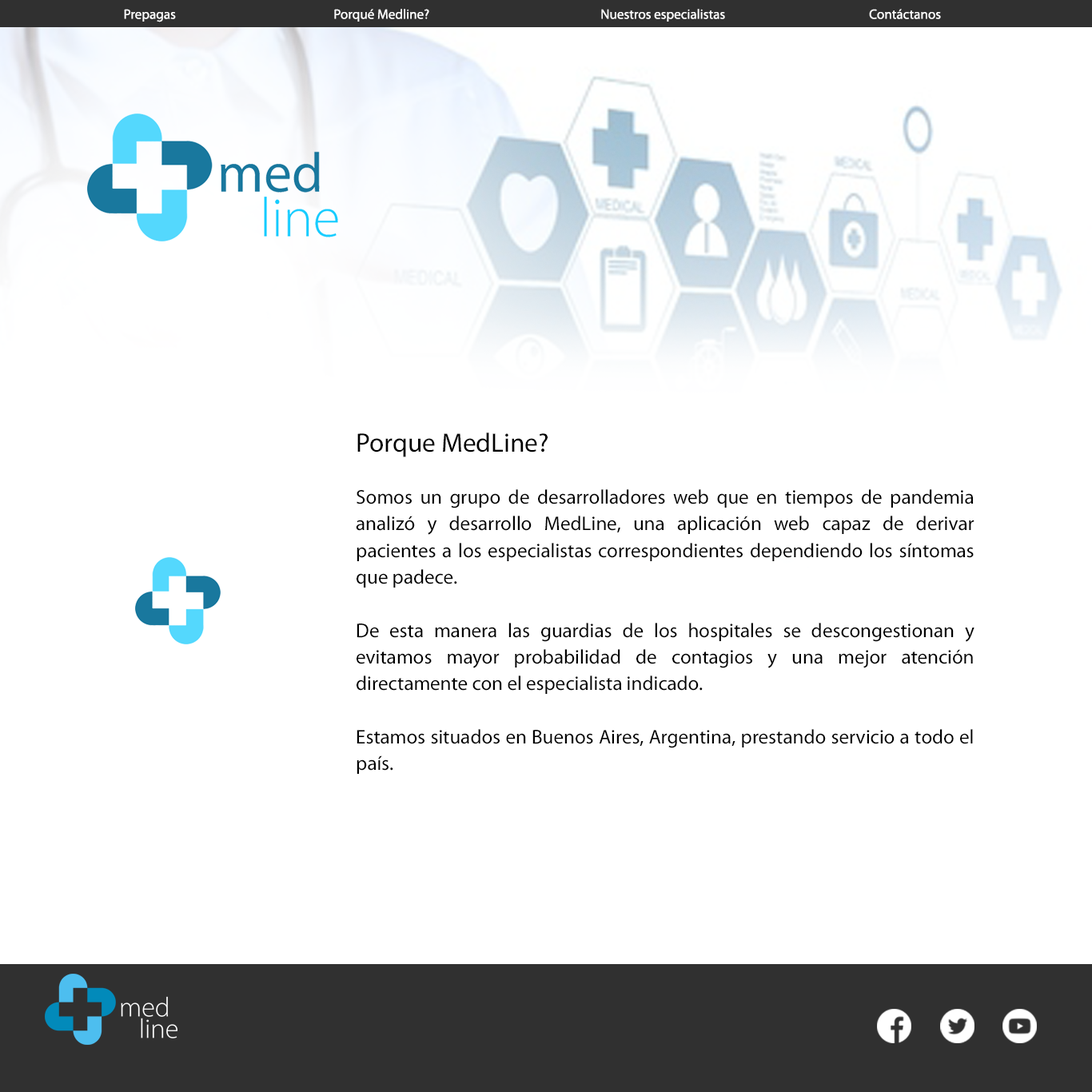
<style>
.page{position:relative;width:1092px;height:1092px;background:#ffffff}
.page>*{position:absolute;margin:0}
.t1{font:13.7px "MyriadPro-Regular";color:#ffffff}
.t2{font:26.6px "MyriadPro-Regular";color:#000000}
.t3{font:20px/26.6px "MyriadPro-Regular";color:#000000}
</style>
<div class="page">
<p class="t1" style="left:124px;top:9px;width:52px;height:13px">Prepagas</p>
<p class="t1" style="left:334px;top:9px;width:95px;height:13px">Porqué Medline?</p>
<p class="t1" style="left:601px;top:9px;width:124px;height:13px">Nuestros especialistas</p>
<p class="t1" style="left:869px;top:9px;width:72px;height:10px">Contáctanos</p>
<p class="t2" style="left:357px;top:432px;width:191px;height:25px">Porque MedLine?</p>
<p class="t3" style="left:356px;top:489px;width:618px;height:285px;text-align:justify">Somos un grupo de desarrolladores web que en tiempos de pandemia analizó y desarrollo MedLine, una aplicación web capaz de derivar pacientes a los especialistas correspondientes dependiendo los síntomas que padece.<br><br>De esta manera las guardias de los hospitales se descongestionan y evitamos mayor probabilidad de contagios y una mejor atención directamente con el especialista indicado. <br><br>Estamos situados en Buenos Aires, Argentina, prestando servicio a todo el país.</p>
</div>
